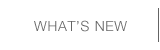
<style>
.page{position:relative;width:160px;height:50px;background:#ffffff}
.page>*{position:absolute;margin:0}
.t1{font:14px "HelveticaNeue-Light";letter-spacing:0.05em;color:#646464}
</style>
<div class="page">
<p class="t1" style="left:34px;top:20px;width:93px;height:12px">WHAT’S NEW</p>
</div>
